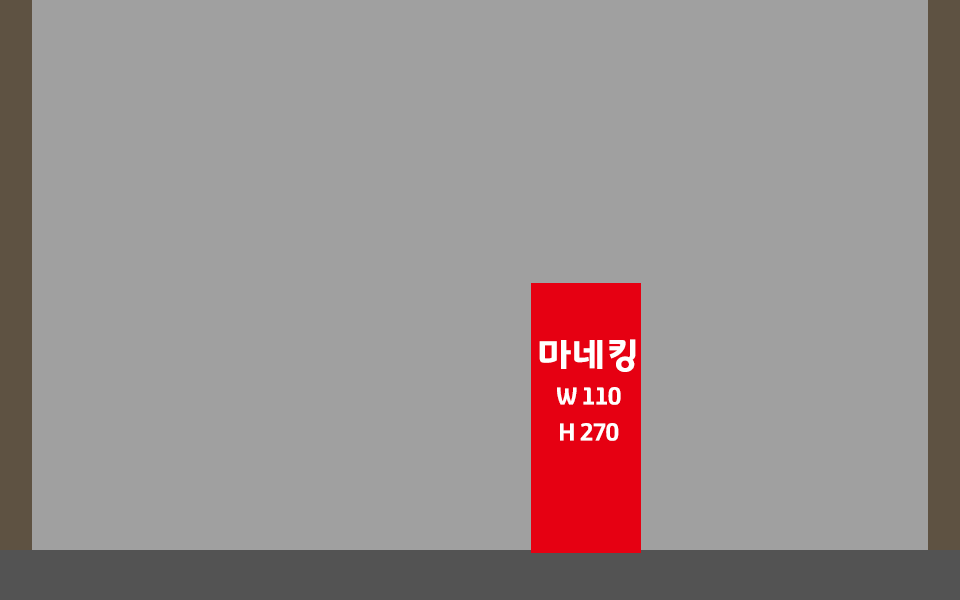
<style>
.page{position:relative;width:960px;height:600px;background:#a0a0a0}
.page>*{position:absolute;margin:0}
.t1{font:24px/36px "GyeonggiTitleV";letter-spacing:-0.05em;color:#ffffff}
.t2{font:36px/12px "GyeonggiTitleV";letter-spacing:-0.05em;color:#ffffff}
</style>
<div class="page">
<p class="t1" style="left:539px;top:339px;width:97px;height:102px;text-align:center"><span class="t2">마네킹<br><br><br><br></span>W 110<br>H 270</p>
</div>
